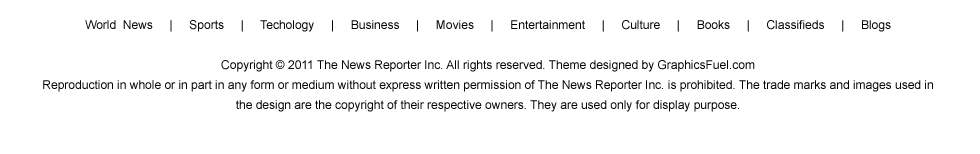
<style>
.page{position:relative;width:980px;height:154px;background:#ffffff}
.page>*{position:absolute;margin:0}
.t1{font:11.9px/19.9px "ArialMT";color:#020305}
</style>
<div class="page">
<p class="t1" style="left:43px;top:20px;width:890px;height:92px;text-align:center">World  News     |     Sports     |     Techology     |     Business     |     Movies     |     Entertainment     |     Culture     |     Books     |     Classifieds     |     Blogs<br><br>Copyright © 2011 The News Reporter Inc. All rights reserved. Theme designed by GraphicsFuel.com<br>Reproduction in whole or in part in any form or medium without express written permission of The News Reporter Inc. is prohibited. The trade marks and images used in the design are the copyright of their respective owners. They are used only for display purpose.</p>
</div>
